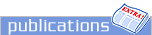
<style>
.page{position:relative;width:152px;height:35px;background:#ffffff}
.page>*{position:absolute;margin:0}
.t1{font:17px "JuliusCondensed";letter-spacing:0.075em;color:#ffffff;font-weight:bold}
</style>
<div class="page">
<p class="t1" style="left:8px;top:19px;width:101px;height:16px">publications</p>
</div>
